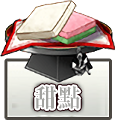
<style>
.page{position:relative;width:115px;height:120px;background:#ffffff}
.page>*{position:absolute;margin:0}
.t1{font:25px "RyuminPr6N-ExBold";letter-spacing:0.075em;color:#a3a3a0;scale:0.9 1}
</style>
<div class="page">
<p class="t1" style="left:35px;top:86px;width:45px;height:23px">甜點</p>
</div>
